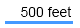
<style>
.page{position:relative;width:80px;height:28px;background:#ffffff}
.page>*{position:absolute;margin:0}
.t1{font:14px "ArialMT";color:#000000}
</style>
<div class="page">
<p class="t1" style="left:21px;top:6px;width:51px;height:11px">500 feet</p>
</div>
